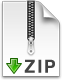
<style>
.page{position:relative;width:62px;height:80px}
.page>*{position:absolute;margin:0}
.t1{font:18px "Helvetica-Bold";letter-spacing:0.1em;color:#444444}
</style>
<div class="page">
<p class="t1" style="left:24px;top:59px;width:31px;height:14px">ZIP</p>
</div>
